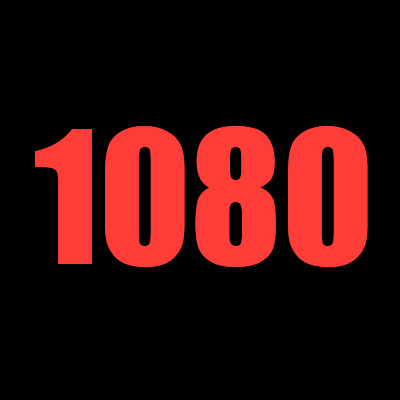
<style>
.page{position:relative;width:400px;height:400px;background:#000000}
.page>*{position:absolute;margin:0}
.t1{font:171px "Impact";letter-spacing:-0.001em;color:#fe3d38}
</style>
<div class="page">
<p class="t1" style="left:35px;top:126px;width:333px;height:141px">1080</p>
</div>
